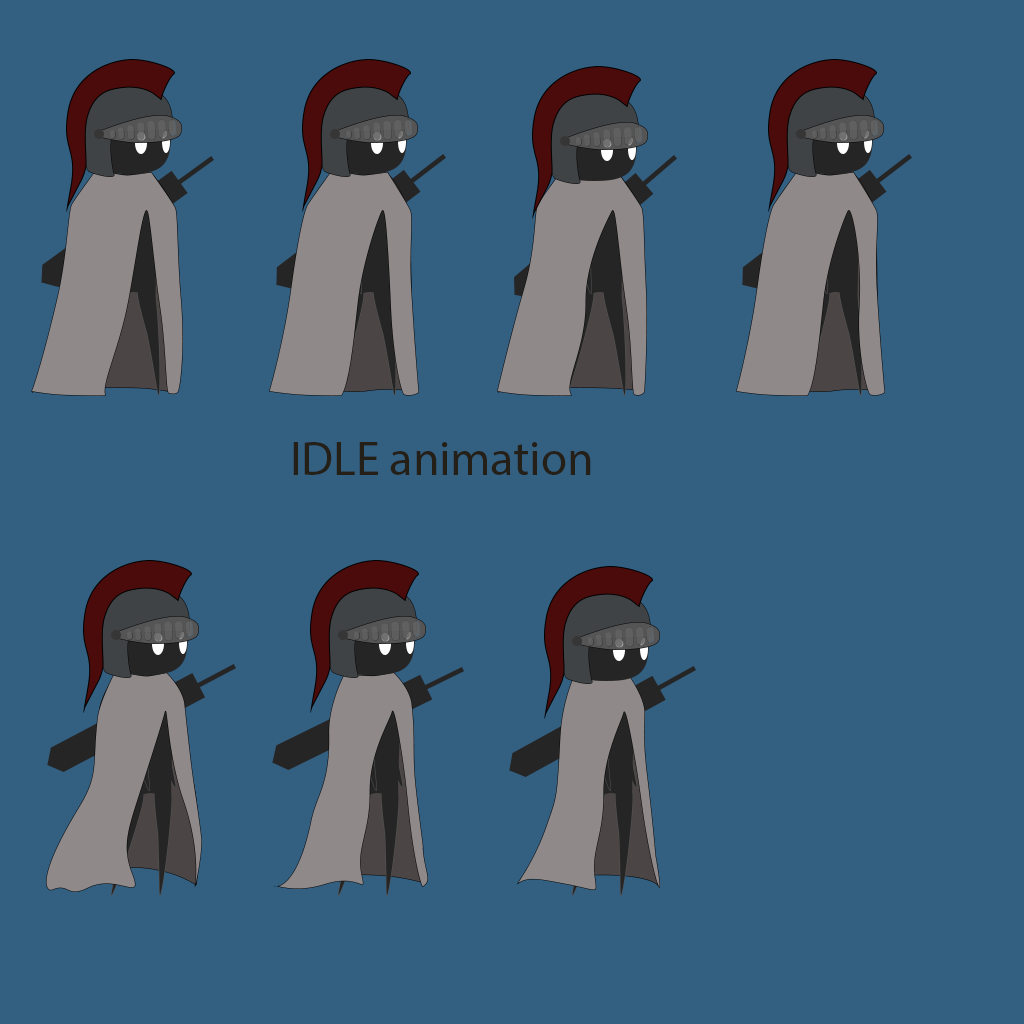
<style>
.page{position:relative;width:1024px;height:1024px;background:#335f81}
.page>*{position:absolute;margin:0}
.t1{font:48px "MyriadHebrew-Regular";color:#252017}
</style>
<div class="page">
<p class="t1" style="left:293px;top:442px;width:298px;height:33px">IDLE animation</p>
</div>
